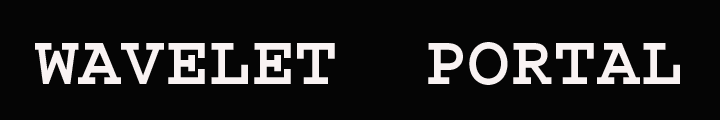
<style>
.page{position:relative;width:720px;height:120px;background:#050505}
.page>*{position:absolute;margin:0}
.t1{font:72px "Courier-Bold";color:#f9f3f3}
</style>
<div class="page">
<p class="t1" style="left:35px;top:42px;width:645px;height:43px">WAVELET  PORTAL</p>
</div>
